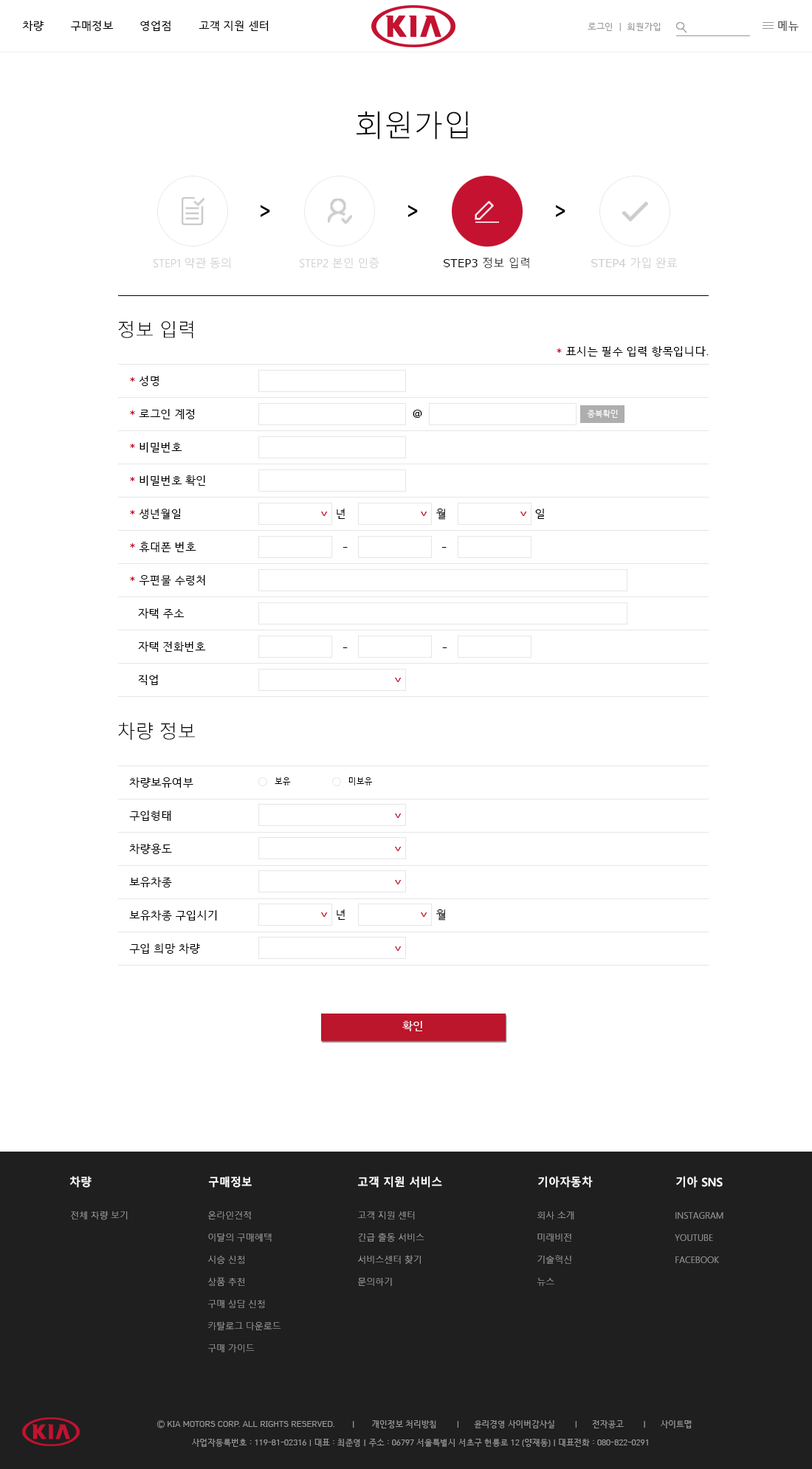
<style>
.page{position:relative;width:812px;height:1469px;background:#ffffff}
.page>*{position:absolute;margin:0}
.t1{font:11.1px "HCRDotum";color:#000000}
.t2{font:8.9px "HCRDotum";color:#979797}
.t3{font:11.1px "HCRDotum";color:#4c4c4c}
.t4{font:29.4px "MalgunGothic-Semilight";color:#000000}
.t5{font:11.1px "MalgunGothic-Semilight";color:#cccccc}
.t6{font:11.2px "Verdana";color:#000000}
.t7{font:11.2px "MalgunGothic-Semilight";color:#000000}
.t8{font:11.2px "Verdana";color:#cccccc}
.t9{font:11.2px "MalgunGothic-Semilight";color:#cccccc}
.t10{font:18.3px "MalgunGothic-Semilight";color:#000000}
.t11{font:11.2px "HCRDotum";color:#000000}
.t12{font:12.5px "HCRDotum";color:#c41230}
.t13{font:13.3px "HCRDotum";color:#c41230}
.t14{font:8.1px "HCRDotum";color:#ffffff}
.t15{font:8.1px "HCRDotum";color:#000000}
.t16{font:11.1px "HCRDotum";color:#ffffff}
.t17{font:11.4px "MalgunGothicBold";color:#ffffff;scale:0.97 1}
.t18{font:8.9px "MalgunGothic-Semilight";color:#979797}
.t19{font:8.9px/22.1px "MalgunGothic-Semilight";color:#979797}
.t20{font:8.1px "HCRDotum";color:#999999}
</style>
<div class="page">
<p class="t1" style="left:22px;top:21px;width:246px;height:10px">차량        구매정보        영업점        고객 지원 센터</p>
<p class="t2" style="left:587px;top:23px;width:74px;height:8px">로그인  |  회원가입</p>
<p class="t3" style="left:778px;top:21px;width:21px;height:10px">메뉴</p>
<p class="t4" style="left:356px;top:111px;width:112px;height:28px">회원가입</p>
<p class="t5" style="left:153px;top:258px;width:77px;height:11px">STEP1 약관 동의</p>
<p class="t5" style="left:300px;top:258px;width:79px;height:11px">STEP2 본인 인증</p>
<p class="t6" style="left:443px;top:257px;width:86px;height:12px">STEP3 <span class="t7">정보 입력</span></p>
<p class="t8" style="left:590px;top:257px;width:87px;height:12px">STEP4 <span class="t9">가입 완료</span></p>
<p class="t10" style="left:118px;top:320px;width:75px;height:19px">정보 입력</p>
<p class="t11" style="left:557px;top:346px;width:152px;height:10px"><span class="t12">*</span> 표시는 필수 입력 항목입니다.</p>
<p class="t1" style="left:130px;top:376px;width:29px;height:10px"><span class="t13">*</span> 성명</p>
<p class="t1" style="left:130px;top:409px;width:64px;height:10px"><span class="t13">*</span> 로그인 계정</p>
<p class="t1" style="left:413px;top:410px;width:9px;height:8px">@</p>
<p class="t14" style="left:587px;top:410px;width:31px;height:8px">중복확인</p>
<p class="t1" style="left:130px;top:442px;width:52px;height:10px"><span class="t13">*</span> 비밀번호</p>
<p class="t1" style="left:130px;top:475px;width:75px;height:11px"><span class="t13">*</span> 비밀번호 확인</p>
<p class="t1" style="left:130px;top:509px;width:51px;height:11px"><span class="t13">*</span> 생년월일</p>
<p class="t11" style="left:337px;top:509px;width:8px;height:10px">년</p>
<p class="t11" style="left:436px;top:508px;width:10px;height:12px">월</p>
<p class="t11" style="left:535px;top:509px;width:9px;height:10px">일</p>
<p class="t1" style="left:130px;top:542px;width:66px;height:10px"><span class="t13">*</span> 휴대폰 번호</p>
<p class="t11" style="left:342px;top:547px;width:6px;height:1px">-</p>
<p class="t11" style="left:441px;top:547px;width:6px;height:1px">-</p>
<p class="t1" style="left:130px;top:575px;width:75px;height:11px"><span class="t13">*</span> 우편물 수령처</p>
<p class="t1" style="left:138px;top:608px;width:47px;height:10px">자택 주소</p>
<p class="t1" style="left:138px;top:641px;width:68px;height:11px">자택 전화번호</p>
<p class="t1" style="left:342px;top:647px;width:6px;height:1px">-</p>
<p class="t1" style="left:442px;top:647px;width:5px;height:1px">-</p>
<p class="t1" style="left:138px;top:675px;width:20px;height:10px">직업</p>
<p class="t10" style="left:118px;top:722px;width:77px;height:18px">차량 정보</p>
<p class="t1" style="left:129px;top:777px;width:64px;height:11px">차량보유여부</p>
<p class="t15" style="left:275px;top:777px;width:16px;height:8px">보유</p>
<p class="t15" style="left:348px;top:777px;width:24px;height:8px">미보유</p>
<p class="t1" style="left:129px;top:810px;width:42px;height:11px">구입형태</p>
<p class="t1" style="left:129px;top:844px;width:43px;height:10px">차량용도</p>
<p class="t1" style="left:129px;top:877px;width:43px;height:11px">보유차종</p>
<p class="t1" style="left:129px;top:910px;width:88px;height:11px">보유차종 구입시기</p>
<p class="t11" style="left:337px;top:909px;width:8px;height:11px">년</p>
<p class="t11" style="left:436px;top:909px;width:10px;height:11px">월</p>
<p class="t1" style="left:129px;top:943px;width:71px;height:11px">구입 희망 차량</p>
<p class="t16" style="left:402px;top:1021px;width:20px;height:10px">확인</p>
<p class="t17" style="left:69px;top:1176px;width:23px;height:12px">차량</p>
<p class="t17" style="left:208px;top:1176px;width:44px;height:12px">구매정보</p>
<p class="t17" style="left:357px;top:1176px;width:85px;height:12px">고객 지원 서비스</p>
<p class="t17" style="left:538px;top:1176px;width:55px;height:12px">기아자동차</p>
<p class="t17" style="left:676px;top:1176px;width:47px;height:12px">기아 SNS</p>
<p class="t18" style="left:71px;top:1210px;width:57px;height:10px">전체 차량 보기</p>
<p class="t19" style="left:207px;top:1210px;width:74px;height:142px">온라인견적<br>이달의 구매혜택<br>시승 신청<br>상품 추천<br>구매 상담 신청<br>카탈로그 다운로드<br>구매 가이드</p>
<p class="t19" style="left:357px;top:1211px;width:67px;height:75px">고객 지원 센터<br>긴급 출동 서비스<br>서비스센터 찾기<br>문의하기</p>
<p class="t19" style="left:537px;top:1211px;width:37px;height:75px">회사 소개<br>미래비전<br>기술혁신<br>뉴스</p>
<p class="t19" style="left:675px;top:1212px;width:48px;height:51px">INSTAGRAM<br>YOUTUBE<br>FACEBOOK</p>
<p class="t20" style="left:156px;top:1420px;width:536px;height:8px">Ⓒ KIA MOTORS CORP. ALL RIGHTS RESERVED.       |       개인정보 처리방침        |      윤리경영 사이버감사실        |      전자공고        |      사이트맵</p>
<p class="t20" style="left:192px;top:1438px;width:456px;height:9px">사업자등록번호 : 119-81-02316 | 대표 : 최준영 | 주소 : 06797 서울특별시 서초구 헌릉로 12 (양재동) | 대표전화 : 080-822-0291</p>
</div>
